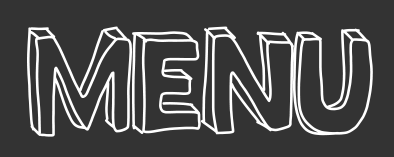
<style>
.page{position:relative;width:394px;height:157px;background:#333333}
.page>*{position:absolute;margin:0}
.t1{font:138.9px "THE_MILLION_MILE_MAN";color:#ffffff}
</style>
<div class="page">
<p class="t1" style="left:27px;top:26px;width:346px;height:111px">MEnu</p>
</div>
